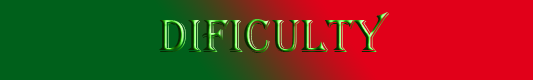
<style>
.page{position:relative;width:533px;height:80px;background:#00601b}
.page>*{position:absolute;margin:0}
.t1{font:48px "Algerian"}
</style>
<div class="page">
<p class="t1" style="left:159px;top:12px;width:230px;height:41px">Dificulty</p>
</div>
